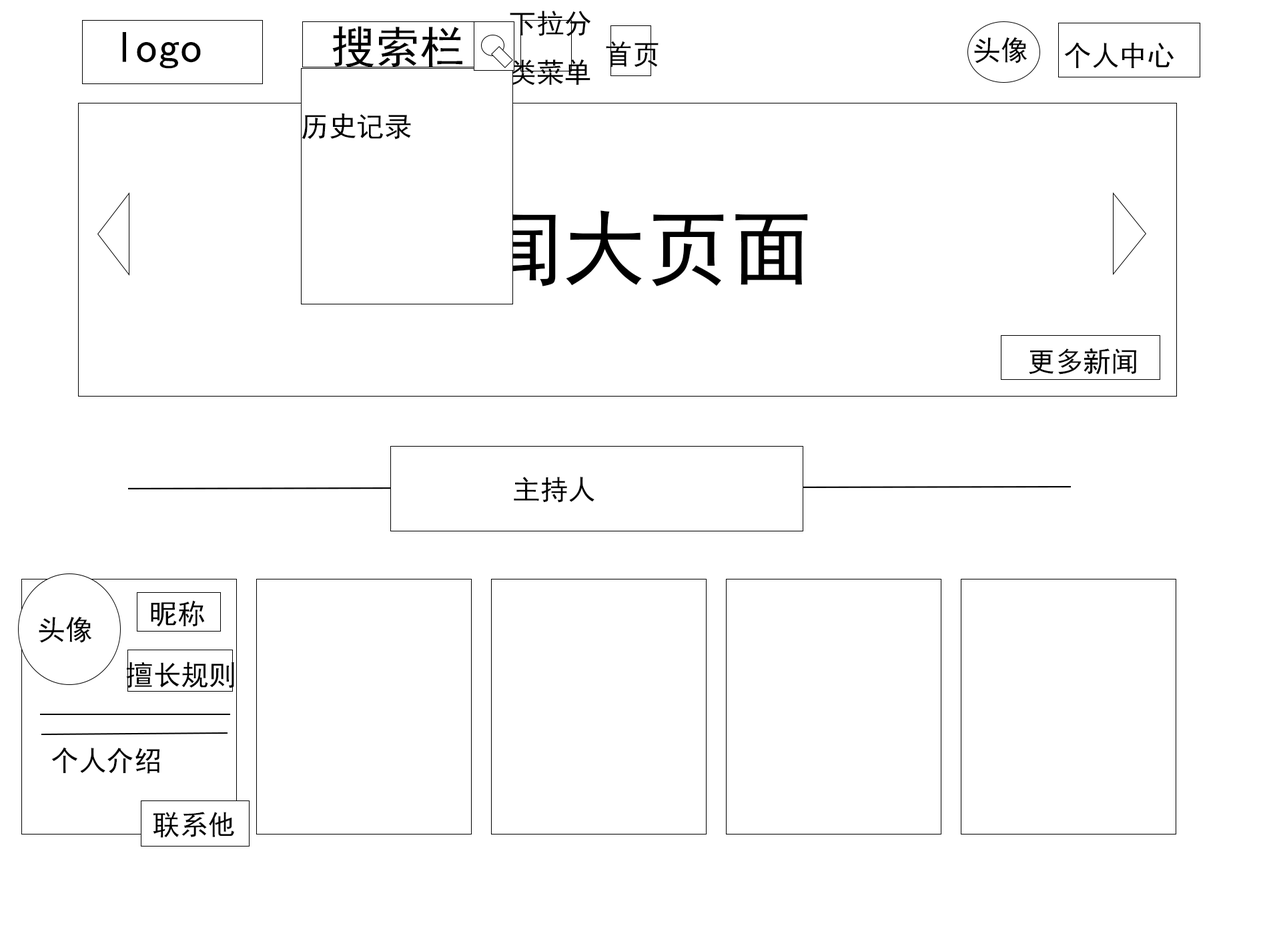
<style>
.page{position:relative;width:1261px;height:946px;background:#ffffff}
.page>*{position:absolute;margin:0}
.t1{font:27.8px "SimHei";color:#000000}
.t2{font:44.5px "SimHei";color:#000000}
.t3{font:83.4px "SimHei";color:#000000}
</style>
<div class="page">
<p class="t1" style="left:510px;top:11px;width:81px;height:74px">下拉分<br>类菜单</p>
<p class="t2" style="left:332px;top:26px;width:130px;height:41px">搜索栏</p>
<p class="t2" style="left:122px;top:32px;width:79px;height:37px">logo</p>
<p class="t1" style="left:606px;top:41px;width:53px;height:26px">首页</p>
<p class="t1" style="left:974px;top:37px;width:54px;height:26px">头像</p>
<p class="t1" style="left:1064px;top:42px;width:110px;height:26px">个人中心</p>
<p class="t1" style="left:302px;top:113px;width:109px;height:26px">历史记录</p>
<p class="t3" style="left:399px;top:208px;width:409px;height:79px">新闻大页面</p>
<p class="t1" style="left:1029px;top:348px;width:107px;height:26px">更多新闻</p>
<p class="t1" style="left:514px;top:476px;width:81px;height:26px">主持人</p>
<p class="t1" style="left:151px;top:600px;width:54px;height:27px">昵称</p>
<p class="t1" style="left:39px;top:616px;width:53px;height:27px">头像</p>
<p class="t1" style="left:126px;top:661px;width:108px;height:27px">擅长规则</p>
<p class="t1" style="left:51px;top:747px;width:109px;height:26px">个人介绍</p>
<p class="t1" style="left:153px;top:811px;width:81px;height:26px">联系他</p>
</div>
